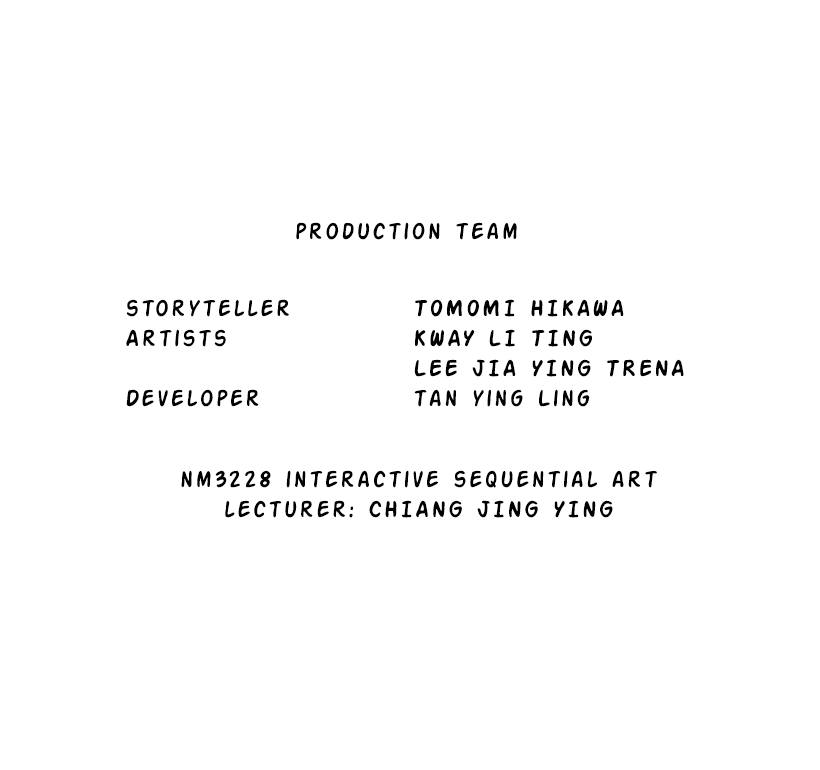
<style>
.page{position:relative;width:820px;height:770px;background:#ffffff}
.page>*{position:absolute;margin:0}
.t1{font:25px "ActionMan";letter-spacing:0.1em;color:#000000}
</style>
<div class="page">
<p class="t1" style="left:296px;top:222px;width:221px;height:18px">production team</p>
<p class="t1" style="left:126px;top:299px;width:163px;height:108px">storyteller          <br>Artists        <br>                       <br>Developer</p>
<p class="t1" style="left:414px;top:299px;width:270px;height:108px">TOMOMI HIKAWA <br>KWAY LI TING <br>LEE JIA YING TRENA<br>tan ying Ling</p>
<p class="t1" style="left:181px;top:470px;width:476px;height:48px;text-align:center">nm3228 interactive sequential art <br>lecturer: CHIANG JING YING</p>
</div>
